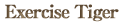
<style>
.page{position:relative;width:124px;height:26px;background:#ffffff}
.page>*{position:absolute;margin:0}
.t1{font:18px "RyuminPro-ExBold";letter-spacing:-0.08em;color:#69553d;font-weight:bold}
</style>
<div class="page">
<p class="t1" style="left:5px;top:4px;width:114px;height:18px">Exercise Tiger</p>
</div>
